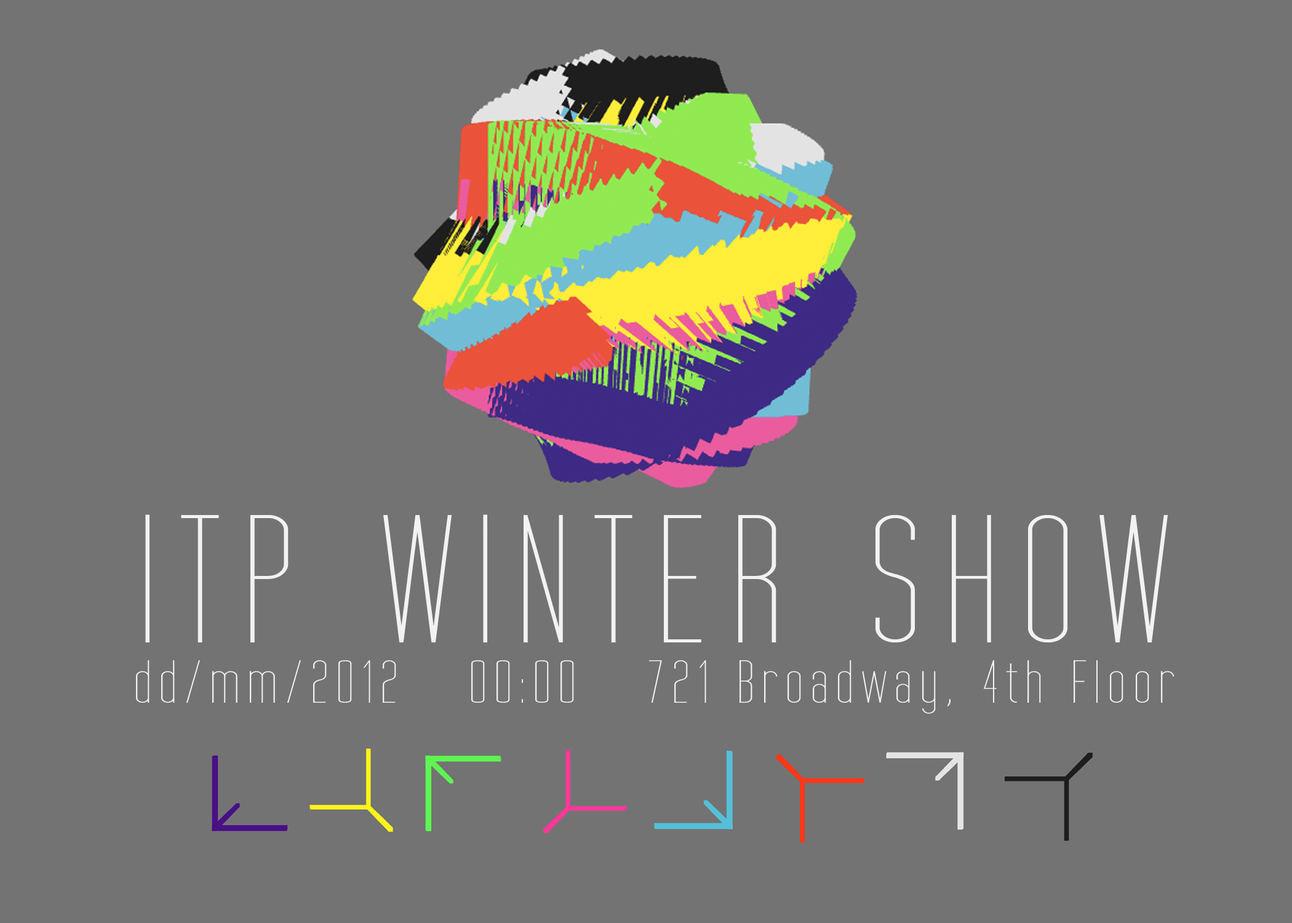
<style>
.page{position:relative;width:1292px;height:923px;background:#737373}
.page>*{position:absolute;margin:0}
.t1{font:184.6px "TallFilmsExpanded";letter-spacing:0.1em;color:#f2f2f2}
.t2{font:61.5px "TallFilmsExpanded";letter-spacing:0.1em;color:#f2f2f2}
</style>
<div class="page">
<p class="t1" style="left:145px;top:514px;width:1023px;height:128px">ITP WINTER SHOW</p>
<p class="t2" style="left:136px;top:660px;width:1039px;height:54px">dd/mm/2012   00:00   721 Broadway, 4th Floor</p>
</div>
